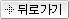
<style>
.page{position:relative;width:69px;height:19px}
.page>*{position:absolute;margin:0}
.t1{font:12px "Dotum";letter-spacing:-0.05em;color:#000000}
</style>
<div class="page">
<p class="t1" style="left:18px;top:4px;width:43px;height:11px">뒤로가기</p>
</div>
